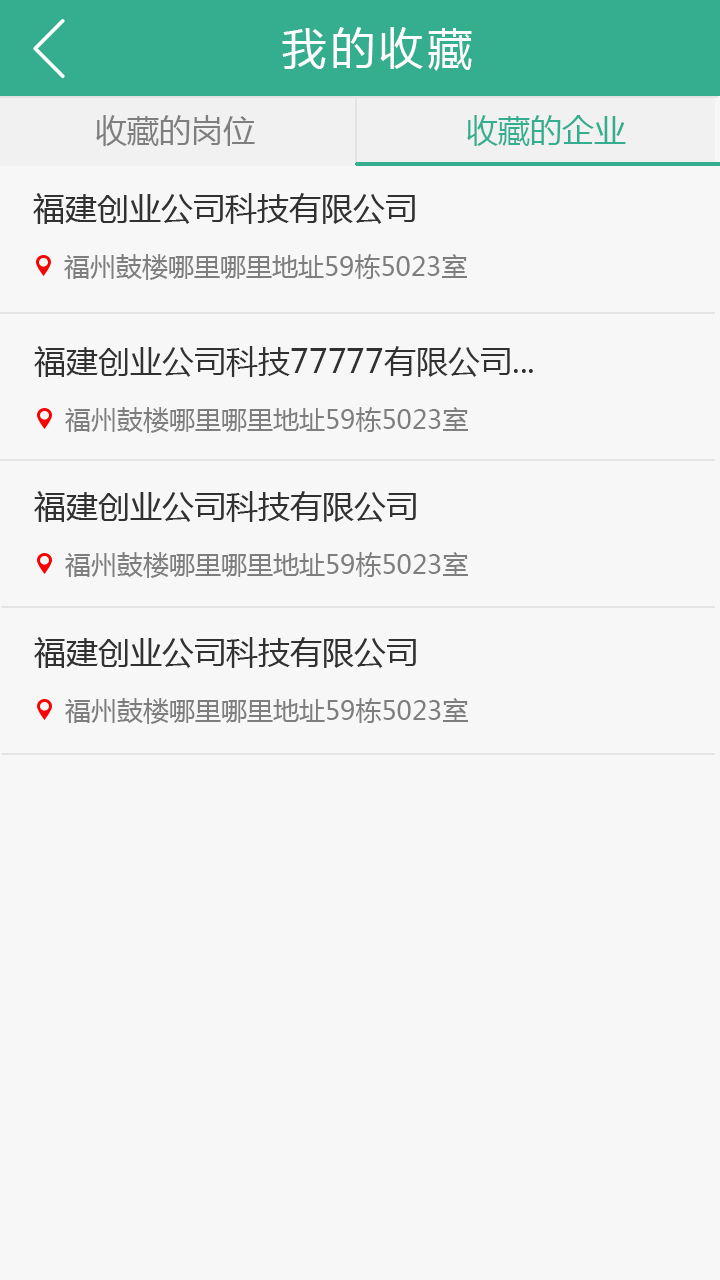
<style>
.page{position:relative;width:720px;height:1280px;background:#f7f7f7}
.page>*{position:absolute;margin:0}
.t1{font:44px "MicrosoftYaHei";letter-spacing:0.1em;color:#ffffff}
.t2{font:32px "MicrosoftYaHei";color:#7e7e7e}
.t3{font:32px "MicrosoftYaHei";color:#35ae8f}
.t4{font:32px "MicrosoftYaHei";color:#313131}
.t5{font:26px "MicrosoftYaHei";color:#7e7e7e}
</style>
<div class="page">
<p class="t1" style="left:282px;top:27px;width:190px;height:44px">我的收藏</p>
<p class="t2" style="left:96px;top:115px;width:159px;height:31px">收藏的岗位</p>
<p class="t3" style="left:467px;top:115px;width:159px;height:31px">收藏的企业</p>
<p class="t4" style="left:34px;top:346px;width:499px;height:31px">福建创业公司科技77777有限公司...</p>
<p class="t5" style="left:65px;top:407px;width:403px;height:26px">福州鼓楼哪里哪里地址59栋5023室</p>
</div>
